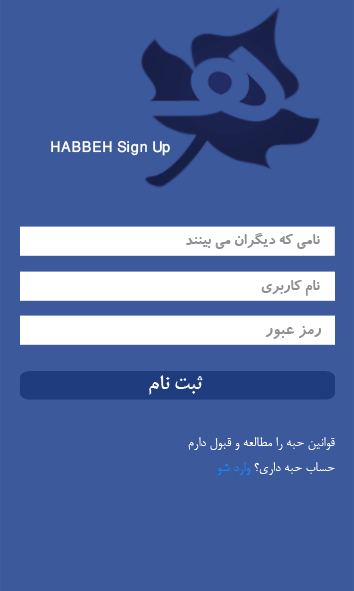
<style>
.page{position:relative;width:354px;height:591px;background:#3c599b}
.page>*{position:absolute;margin:0}
.t1{font:20.9px "WinSoftPro-Medium";color:#ffffff}
.t2{font:20.9px "EstrangeloEdessa";color:#ffffff}
.t3{font:16.7px "BKoodakBold";color:#909090}
.t4{font:18.7px "BKoodakBold";color:#909090}
.t5{font:20.9px "BMitraBold";color:#ffffff}
.t6{font:14.6px "BNazanin";color:#ffffff}
.t7{font:14.6px "BNazanin";color:#1388ff}
</style>
<div class="page">
<p class="t1" style="left:51px;top:140px;width:119px;height:16px"><span class="t2">HABBEH </span>Sign Up</p>
<p class="t3" style="left:186px;top:233px;width:134px;height:16px">نامي که ديگران مي بينند</p>
<p class="t3" style="left:261px;top:280px;width:59px;height:16px">نام کاربري</p>
<p class="t4" style="left:265px;top:326px;width:57px;height:13px">رمز عبور</p>
<p class="t5" style="left:149px;top:375px;width:54px;height:20px">ثبت نام</p>
<p class="t6" style="left:188px;top:437px;width:147px;height:13px">قوانين حبه را مطالعه و قبول دارم</p>
<p class="t6" style="left:217px;top:462px;width:118px;height:13px">حساب حبه داري؟ <span class="t7">وارد شو</span></p>
</div>
